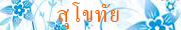
<style>
.page{position:relative;width:181px;height:30px}
.page>*{position:absolute;margin:0}
.t1{font:30px "AngsanaUPC";letter-spacing:0.025em;color:#f96308}
</style>
<div class="page">
<p class="t1" style="left:57px;top:2px;width:62px;height:27px">สุโขทัย</p>
</div>
